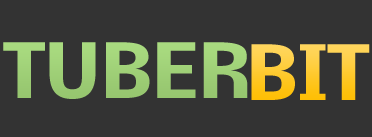
<style>
.page{position:relative;width:372px;height:137px;background:#333333}
.page>*{position:absolute;margin:0}
.t1{font:70px "Nobile-Bold";color:#a0d178}
.t2{font:70px "Nobile-Bold"}
</style>
<div class="page">
<p class="t1" style="left:3px;top:42px;width:245px;height:57px">TUBER</p>
<p class="t2" style="left:251px;top:44px;width:119px;height:56px">BIT</p>
</div>
